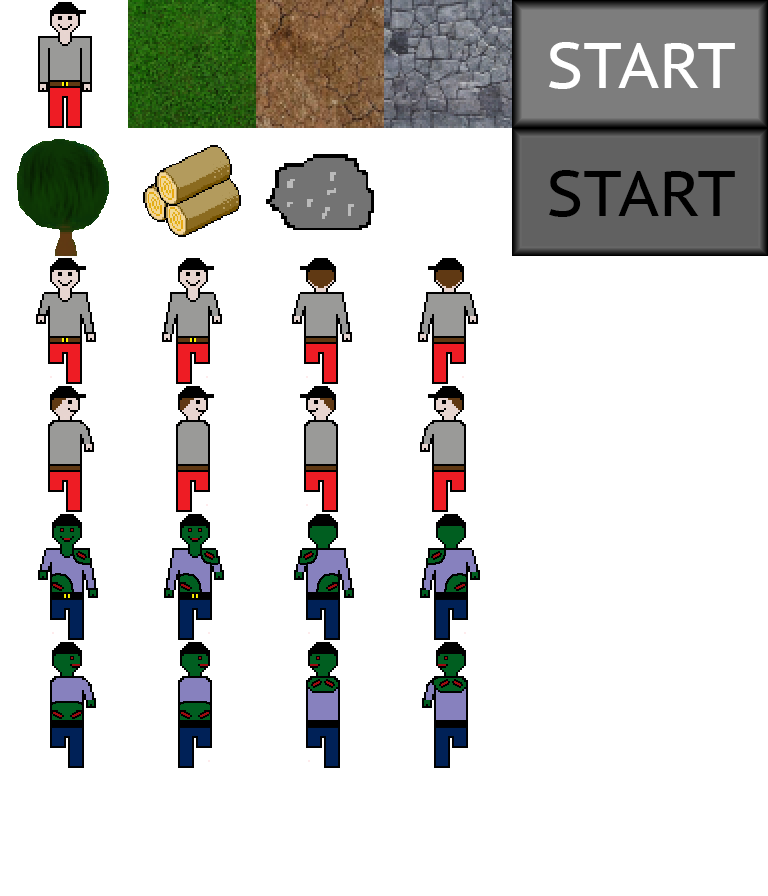
<style>
.page{position:relative;width:768px;height:896px;background:#ffffff}
.page>*{position:absolute;margin:0}
.t1{font:64px "PTSans-Caption";color:#ffffff}
.t2{font:64px "PTSans-Caption";color:#000000}
</style>
<div class="page">
<p class="t1" style="left:549px;top:42px;width:186px;height:47px">START</p>
<p class="t2" style="left:549px;top:170px;width:186px;height:47px">START</p>
</div>
